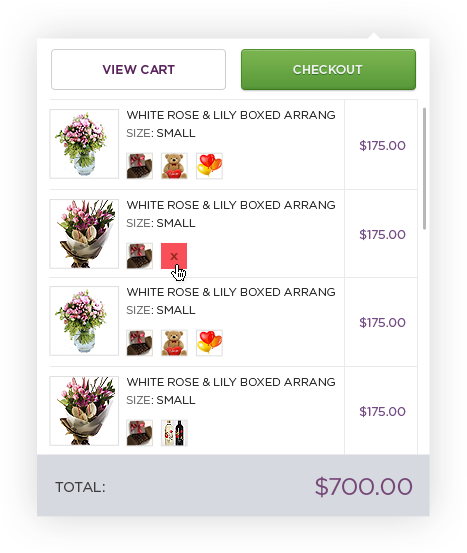
<style>
.page{position:relative;width:467px;height:553px;background:#ffffff}
.page>*{position:absolute;margin:0}
.t1{font:12px "Gotham-Medium";color:#59245c;text-transform:uppercase}
.t2{font:12px "Gotham-Medium";color:#efefef;text-transform:uppercase}
.t3{font:11px/12px "Gotham-Light";color:#2d2d2d;text-transform:uppercase}
.t4{font:11px/18px "Gotham-Light";color:#707070;text-transform:uppercase}
.t5{font:11px/18px "Gotham-Light";color:#2d2d2d;text-transform:uppercase}
.t6{font:12px "Gotham-Book";color:#754c84;text-transform:uppercase}
.t7{font:10px "Gotham-Bold";color:#962a1f;text-transform:uppercase;scale:1.2 1}
.t8{font:14px "Gotham-Book";color:#3f3c3e;text-transform:uppercase}
.t9{font:24px "Gotham-Book";letter-spacing:-0.02em;color:#754777;text-transform:uppercase}
</style>
<div class="page">
<p class="t1" style="left:102px;top:65px;width:73px;height:9px">view cart</p>
<p class="t2" style="left:293px;top:65px;width:70px;height:9px">checkout</p>
<p class="t3" style="left:126px;top:111px;width:209px;height:26px">White Rose &amp; Lily Boxed Arrang<br><span class="t4">size</span><span class="t5">: small</span></p>
<p class="t6" style="left:359px;top:140px;width:47px;height:12px">$175.00</p>
<p class="t3" style="left:126px;top:201px;width:209px;height:26px">White Rose &amp; Lily Boxed Arrang<br><span class="t4">size</span><span class="t5">: small</span></p>
<p class="t6" style="left:359px;top:229px;width:47px;height:12px">$175.00</p>
<p class="t7" style="left:170px;top:253px;width:8px;height:7px">x</p>
<p class="t3" style="left:126px;top:288px;width:209px;height:26px">White Rose &amp; Lily Boxed Arrang<br><span class="t4">size</span><span class="t5">: small</span></p>
<p class="t6" style="left:359px;top:317px;width:47px;height:12px">$175.00</p>
<p class="t3" style="left:126px;top:378px;width:209px;height:26px">White Rose &amp; Lily Boxed Arrang<br><span class="t4">size</span><span class="t5">: small</span></p>
<p class="t6" style="left:359px;top:406px;width:47px;height:12px">$175.00</p>
<p class="t8" style="left:55px;top:482px;width:50px;height:10px">total:</p>
<p class="t9" style="left:315px;top:476px;width:98px;height:22px">$700.00</p>
</div>
